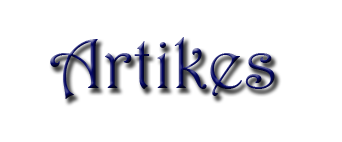
<style>
.page{position:relative;width:342px;height:142px;background:#ffffff}
.page>*{position:absolute;margin:0}
.t1{font:72px "Harrington"}
</style>
<div class="page">
<p class="t1" style="left:50px;top:37px;width:225px;height:62px">Artikes</p>
</div>
